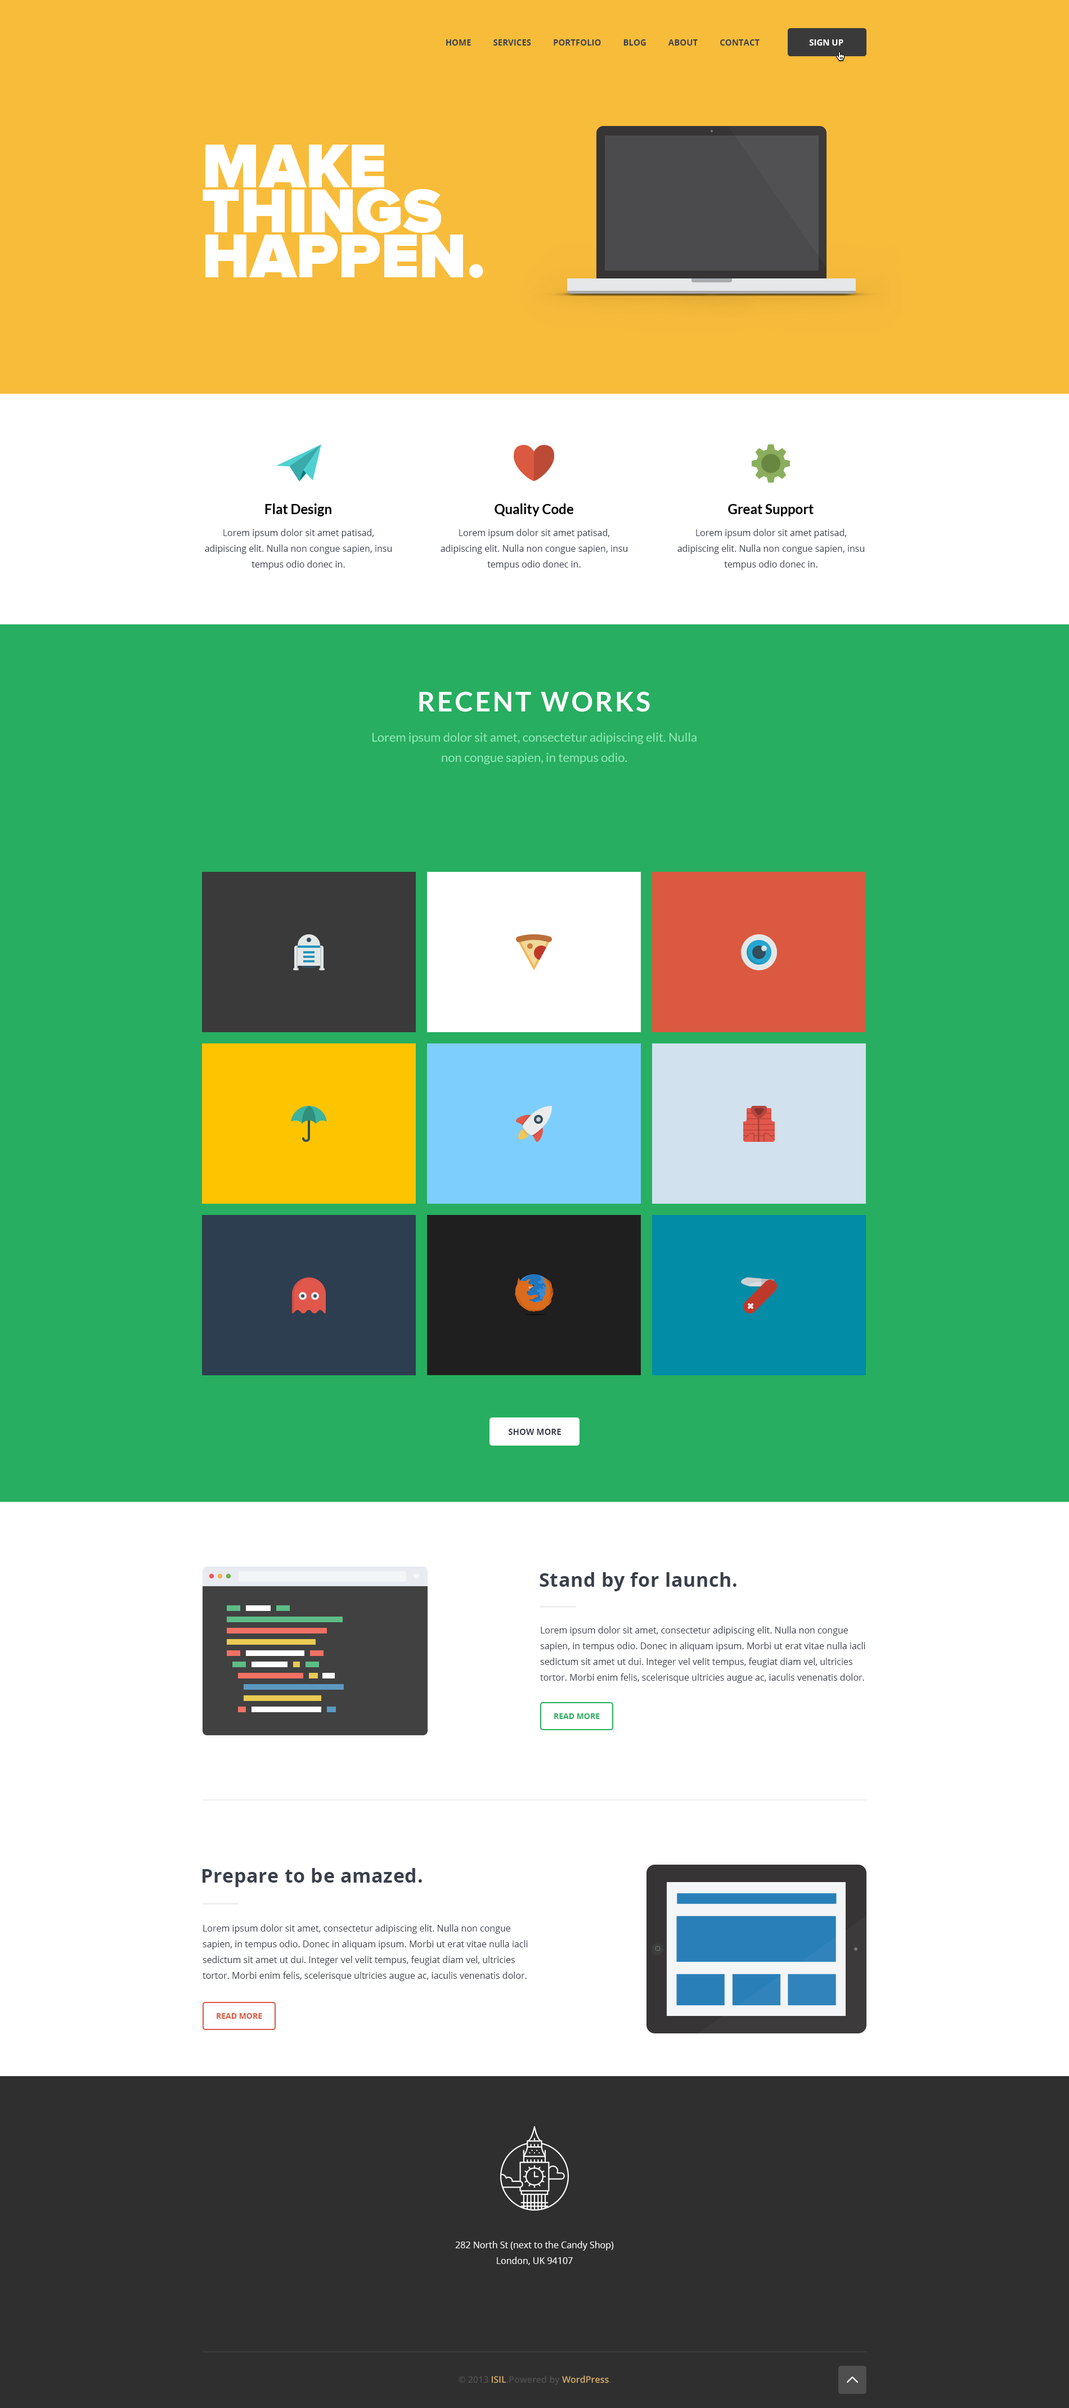
<style>
.page{position:relative;width:1069px;height:2408px;background:#ffffff}
.page>*{position:absolute;margin:0}
.t1{font:8.4px "OpenSans-Bold";color:#393f4a;text-transform:uppercase}
.t2{font:8.4px "OpenSans-Bold";color:#ffffff;text-transform:uppercase}
.t3{font:64.1px/45px "ProximaNova-Black";color:#ffffff;text-transform:uppercase}
.t4{font:13.5px "Lato-Bold";color:#000000}
.t5{font:9px/15.8px "OpenSans";color:#393f4a}
.t6{font:27px "Lato-Bold";letter-spacing:0.08em;color:#ffffff;text-transform:uppercase}
.t7{font:12.4px/20.2px "Lato-Regular";color:#96eaba}
.t8{font:19.1px "OpenSans-Bold";letter-spacing:0.02em;color:#393f4a}
.t9{font:7.9px "OpenSans-Bold";color:#27ae60;text-transform:uppercase}
.t10{font:7.9px "OpenSans-Bold";color:#db5940;text-transform:uppercase}
.t11{font:9px/15.8px "OpenSans";color:#ffffff}
.t12{font:9px "OpenSans-Semibold";color:#4f4f4f}
.t13{font:9px "OpenSans-Semibold";color:#cda869}
</style>
<div class="page">
<p class="t1" style="left:446px;top:39px;width:313px;height:7px">Home          Services          Portfolio          Blog          About          Contact</p>
<p class="t2" style="left:809px;top:39px;width:34px;height:7px">Sign Up</p>
<p class="t3" style="left:202px;top:145px;width:281px;height:133px">MAKE<br>THINGS<br>HAPPEN.</p>
<p class="t4" style="left:265px;top:503px;width:66px;height:13px">Flat Design</p>
<p class="t4" style="left:494px;top:503px;width:79px;height:13px">Quality Code</p>
<p class="t4" style="left:728px;top:504px;width:85px;height:12px">Great Support</p>
<p class="t5" style="left:205px;top:529px;width:187px;height:41px;text-align:center">Lorem ipsum dolor sit amet patisad,<br>adipiscing elit. Nulla non congue sapien, insu tempus odio donec in.</p>
<p class="t5" style="left:440px;top:529px;width:188px;height:41px;text-align:center">Lorem ipsum dolor sit amet patisad,<br>adipiscing elit. Nulla non congue sapien, insu tempus odio donec in.</p>
<p class="t5" style="left:677px;top:529px;width:188px;height:41px;text-align:center">Lorem ipsum dolor sit amet patisad,<br>adipiscing elit. Nulla non congue sapien, insu tempus odio donec in.</p>
<p class="t6" style="left:419px;top:691px;width:231px;height:21px">Recent Works</p>
<p class="t7" style="left:372px;top:732px;width:324px;height:32px;text-align:center">Lorem ipsum dolor sit amet, consectetur adipiscing elit. Nulla non congue sapien, in tempus odio.</p>
<p class="t1" style="left:508px;top:1429px;width:53px;height:6px">SHOW MORE</p>
<p class="t8" style="left:539px;top:1572px;width:197px;height:19px">Stand by for launch.</p>
<p class="t5" style="left:540px;top:1626px;width:325px;height:57px">Lorem ipsum dolor sit amet, consectetur adipiscing elit. Nulla non congue sapien, in tempus odio. Donec in aliquam ipsum. Morbi ut erat vitae nulla iacli<br>sedictum sit amet ut dui. Integer vel velit tempus, feugiat diam vel, ultricies tortor. Morbi enim felis, scelerisque ultricies augue ac, iaculis venenatis dolor.</p>
<p class="t9" style="left:554px;top:1713px;width:46px;height:6px">Read more</p>
<p class="t8" style="left:202px;top:1868px;width:220px;height:19px">Prepare to be amazed.</p>
<p class="t5" style="left:202px;top:1924px;width:326px;height:57px">Lorem ipsum dolor sit amet, consectetur adipiscing elit. Nulla non congue sapien, in tempus odio. Donec in aliquam ipsum. Morbi ut erat vitae nulla iacli<br>sedictum sit amet ut dui. Integer vel velit tempus, feugiat diam vel, ultricies tortor. Morbi enim felis, scelerisque ultricies augue ac, iaculis venenatis dolor.</p>
<p class="t10" style="left:217px;top:2013px;width:45px;height:6px">Read more</p>
<p class="t11" style="left:455px;top:2241px;width:159px;height:24px;text-align:center">282 North St (next to the Candy Shop)<br>London, UK 94107</p>
<p class="t12" style="left:458px;top:2375px;width:153px;height:10px">© 2013 <span class="t13">ISIL</span>.Powered by <span class="t13">WordPress</span>.</p>
</div>
